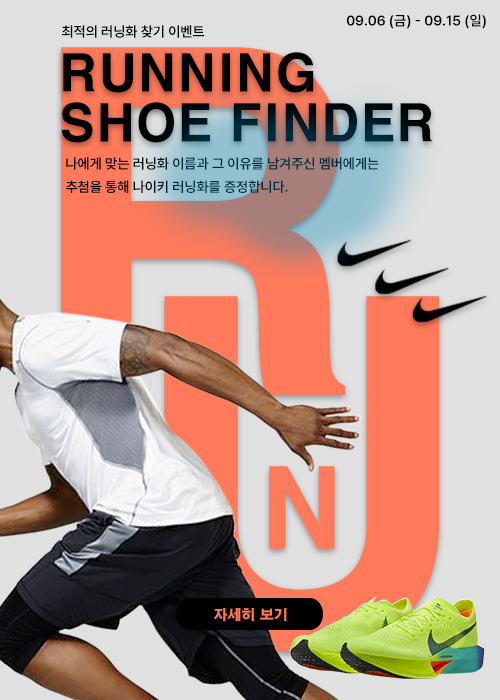
<style>
.page{position:relative;width:500px;height:700px;background:#e0e0e0}
.page>*{position:absolute;margin:0}
.t1{font:14px "Pretendard-SemiBold";color:#000000}
.t2{font:50px/50px "H2gtrE";color:#000000}
.t3{font:14px/23.3px "Pretendard-SemiBold"}
.t4{font:14px "H2gtrE";color:#ff7a5b}
</style>
<div class="page">
<p class="t1" style="left:347px;top:14px;width:139px;height:15px">09.06 (금) - 09.15 (일)</p>
<p class="t1" style="left:62px;top:25px;width:143px;height:13px">최적의 러닝화 찾기 이벤트</p>
<p class="t2" style="left:61px;top:52px;width:371px;height:91px">RUNNING<br>SHOE FINDER</p>
<p class="t3" style="left:66px;top:157px;width:313px;height:36px">나에게 맞는 러닝화 이름과 그 이유를 남겨주신 멤버에게는<br>추첨을 통해 나이키 러닝화를 증정합니다.</p>
<p class="t4" style="left:214px;top:608px;width:73px;height:13px">자세히 보기</p>
</div>
